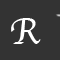
<style>
.page{position:relative;width:60px;height:60px;background:#333333}
.page>*{position:absolute;margin:0}
.t1{font:38px "Apple-Chancery";letter-spacing:0.05em;color:#ffffff}
</style>
<div class="page">
<p class="t1" style="left:11px;top:18px;width:30px;height:26px">R</p>
</div>
